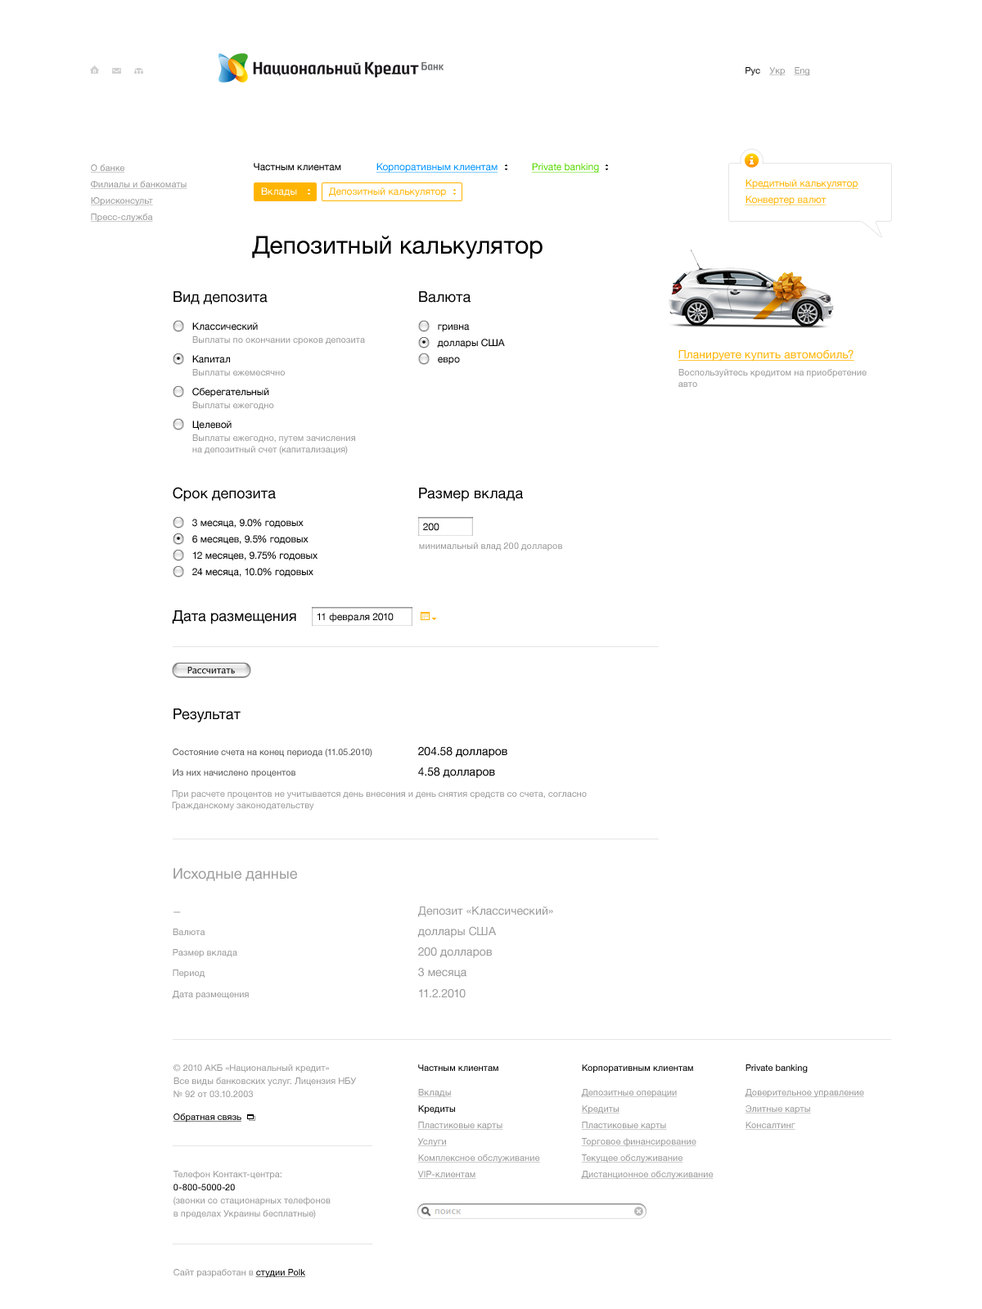
<style>
.page{position:relative;width:982px;height:1309px;background:#ffffff}
.page>*{position:absolute;margin:0}
.t1{font:9px "HelveticaNeue";color:#000000}
.t2{font:9px "HelveticaNeue";color:#999999;text-decoration:underline}
.t3{font:9.8px "HelveticaNeue";color:#000000}
.t4{font:9.8px "HelveticaNeue";color:#0094ff;text-decoration:underline}
.t5{font:9.8px "HelveticaNeue";color:#57d900;text-decoration:underline}
.t6{font:9.8px "HelveticaNeue";color:#ffb400;text-decoration:underline}
.t7{font:9.8px "HelveticaNeue";color:#fffffe}
.t8{font:9.8px "HelveticaNeue";color:#ffb400}
.t9{font:24.5px "HelveticaNeue";color:#000000}
.t10{font:14.7px "HelveticaNeue";color:#010101}
.t11{font:9.8px "HelveticaNeue";color:#010101}
.t12{font:9px "HelveticaNeue";color:#999999}
.t13{font:11.5px "HelveticaNeue";color:#ffb400;text-decoration:underline}
.t14{font:9px "LucidaGrande";color:#000000}
.t15{font:9px "HelveticaNeue";color:#555555}
.t16{font:11.5px "HelveticaNeue";color:#010101}
.t17{font:14.7px "HelveticaNeue";color:#999999}
.t18{font:9px "HelveticaNeue"}
.t19{font:11.5px "HelveticaNeue";color:#999999}
.t20{font:9px/13.1px "HelveticaNeue";color:#999999}
.t21{font:9px "HelveticaNeue";color:#000000;text-decoration:underline}
.t22{font:9px/13.1px "HelveticaNeue";color:#010101}
</style>
<div class="page">
<p class="t1" style="left:745px;top:67px;width:15px;height:9px">Рус</p>
<p class="t2" style="left:769px;top:67px;width:16px;height:9px">Укр</p>
<p class="t2" style="left:794px;top:67px;width:16px;height:9px">Eng</p>
<p class="t2" style="left:90px;top:164px;width:35px;height:9px">О банке</p>
<p class="t3" style="left:254px;top:163px;width:87px;height:8px">Частным клиентам</p>
<p class="t4" style="left:376px;top:163px;width:122px;height:10px">Корпоративным клиентам</p>
<p class="t5" style="left:531px;top:163px;width:69px;height:10px">Private banking</p>
<p class="t2" style="left:90px;top:181px;width:97px;height:8px">Филиалы и банкоматы</p>
<p class="t6" style="left:745px;top:179px;width:113px;height:10px">Кредитный калькулятор</p>
<p class="t2" style="left:90px;top:197px;width:63px;height:9px">Юрисконсульт</p>
<p class="t7" style="left:261px;top:187px;width:36px;height:9px">Вклады</p>
<p class="t8" style="left:329px;top:187px;width:117px;height:10px">Депозитный калькулятор</p>
<p class="t6" style="left:745px;top:196px;width:81px;height:9px">Конвертер валют</p>
<p class="t2" style="left:90px;top:214px;width:63px;height:9px">Пресс-служба</p>
<p class="t9" style="left:252px;top:236px;width:290px;height:23px">Депозитный калькулятор</p>
<p class="t10" style="left:173px;top:291px;width:95px;height:13px">Вид депозита</p>
<p class="t10" style="left:419px;top:291px;width:51px;height:12px">Валюта</p>
<p class="t11" style="left:192px;top:322px;width:66px;height:9px">Классический</p>
<p class="t11" style="left:438px;top:324px;width:32px;height:8px">гривна</p>
<p class="t12" style="left:192px;top:336px;width:173px;height:9px">Выплаты по окончании сроков депозита</p>
<p class="t11" style="left:437px;top:339px;width:68px;height:10px">доллары США</p>
<p class="t13" style="left:677px;top:349px;width:177px;height:12px">Планируете купить автомобиль?</p>
<p class="t11" style="left:192px;top:355px;width:38px;height:8px">Капитал</p>
<p class="t11" style="left:438px;top:357px;width:22px;height:8px">евро</p>
<p class="t12" style="left:192px;top:369px;width:93px;height:7px">Выплаты ежемесячно</p>
<p class="t12" style="left:678px;top:369px;width:188px;height:18px">Воспользуйтесь кредитом на приобретение<br>авто</p>
<p class="t11" style="left:192px;top:388px;width:77px;height:10px">Сберегательный</p>
<p class="t12" style="left:192px;top:402px;width:82px;height:8px">Выплаты ежегодно</p>
<p class="t11" style="left:192px;top:421px;width:40px;height:9px">Целевой</p>
<p class="t12" style="left:192px;top:434px;width:163px;height:21px">Выплаты ежегодно, путем зачисления<br>на депозитный счет (капитализация)</p>
<p class="t10" style="left:173px;top:487px;width:103px;height:15px">Срок депозита</p>
<p class="t10" style="left:419px;top:488px;width:104px;height:14px">Размер вклада</p>
<p class="t11" style="left:192px;top:519px;width:112px;height:9px">3 месяца, 9.0% годовых</p>
<p class="t11" style="left:423px;top:523px;width:16px;height:8px">200</p>
<p class="t11" style="left:192px;top:535px;width:116px;height:9px">6 месяцев, 9.5% годовых</p>
<p class="t12" style="left:419px;top:542px;width:143px;height:9px">минимальный влад 200 долларов</p>
<p class="t11" style="left:192px;top:551px;width:125px;height:9px">12 месяцев, 9.75% годовых</p>
<p class="t11" style="left:192px;top:568px;width:121px;height:9px">24 месяца, 10.0% годовых</p>
<p class="t10" style="left:172px;top:610px;width:124px;height:14px">Дата размещения</p>
<p class="t11" style="left:317px;top:613px;width:77px;height:10px">11 февраля 2010</p>
<p class="t14" style="left:187px;top:667px;width:48px;height:7px">Рассчитать</p>
<p class="t10" style="left:173px;top:709px;width:68px;height:13px">Результат</p>
<p class="t15" style="left:173px;top:749px;width:199px;height:9px">Состояние счета на конец периода (11.05.2010)</p>
<p class="t16" style="left:418px;top:747px;width:89px;height:11px">204.58 долларов</p>
<p class="t15" style="left:173px;top:769px;width:122px;height:9px">Из них начислено процентов</p>
<p class="t16" style="left:418px;top:767px;width:77px;height:11px">4.58 долларов</p>
<p class="t12" style="left:172px;top:790px;width:415px;height:21px">При расчете процентов не учитывается день внесения и день снятия средств со счета, согласно<br>Гражданскому законодательству</p>
<p class="t17" style="left:173px;top:868px;width:124px;height:13px">Исходные данные</p>
<p class="t18" style="left:173px;top:911px;width:8px;height:2px">—</p>
<p class="t19" style="left:418px;top:907px;width:135px;height:10px">Депозит «Классический»</p>
<p class="t12" style="left:173px;top:929px;width:32px;height:6px">Валюта</p>
<p class="t19" style="left:417px;top:926px;width:80px;height:12px">доллары США</p>
<p class="t12" style="left:173px;top:949px;width:64px;height:9px">Размер вклада</p>
<p class="t19" style="left:418px;top:947px;width:74px;height:11px">200 долларов</p>
<p class="t12" style="left:173px;top:970px;width:32px;height:9px">Период</p>
<p class="t19" style="left:418px;top:968px;width:48px;height:11px">3 месяца</p>
<p class="t19" style="left:419px;top:989px;width:47px;height:9px">11.2.2010</p>
<p class="t12" style="left:172px;top:991px;width:77px;height:9px">Дата размещения</p>
<p class="t20" style="left:173px;top:1064px;width:184px;height:33px">© 2010 АКБ «Национальный кредит»<br>Все виды банковских услуг. Лицензия НБУ<br>№ 92 от 03.10.2003</p>
<p class="t1" style="left:418px;top:1064px;width:80px;height:7px">Частным клиентам</p>
<p class="t1" style="left:582px;top:1064px;width:111px;height:9px">Корпоративным клиентам</p>
<p class="t1" style="left:745px;top:1064px;width:63px;height:9px">Private banking</p>
<p class="t2" style="left:417px;top:1089px;width:35px;height:8px">Вклады</p>
<p class="t2" style="left:581px;top:1089px;width:96px;height:9px">Депозитные операции</p>
<p class="t2" style="left:745px;top:1089px;width:119px;height:9px">Доверительное управление</p>
<p class="t1" style="left:418px;top:1105px;width:37px;height:9px">Кредиты</p>
<p class="t2" style="left:581px;top:1105px;width:38px;height:9px">Кредиты</p>
<p class="t2" style="left:745px;top:1105px;width:66px;height:9px">Элитные карты</p>
<p class="t21" style="left:173px;top:1114px;width:68px;height:9px">Обратная связь</p>
<p class="t2" style="left:417px;top:1122px;width:86px;height:9px">Пластиковые карты</p>
<p class="t2" style="left:581px;top:1122px;width:86px;height:9px">Пластиковые карты</p>
<p class="t2" style="left:745px;top:1122px;width:50px;height:8px">Консалтинг</p>
<p class="t2" style="left:417px;top:1138px;width:30px;height:9px">Услуги</p>
<p class="t2" style="left:581px;top:1138px;width:115px;height:9px">Торговое финансирование</p>
<p class="t2" style="left:417px;top:1154px;width:123px;height:9px">Комплексное обслуживание</p>
<p class="t2" style="left:581px;top:1154px;width:102px;height:9px">Текущее обслуживание</p>
<p class="t20" style="left:173px;top:1171px;width:158px;height:48px">Телефон Контакт-центра:<br><span class="t22">0-800-5000-20<br></span>(звонки со стационарных телефонов<br>в пределах Украины бесплатные)</p>
<p class="t2" style="left:417px;top:1171px;width:59px;height:8px">VIP-клиентам</p>
<p class="t2" style="left:581px;top:1171px;width:132px;height:9px">Дистанционное обслуживание</p>
<p class="t12" style="left:173px;top:1269px;width:132px;height:9px">Сайт разработан в <span class="t21">студии Polk</span></p>
</div>
